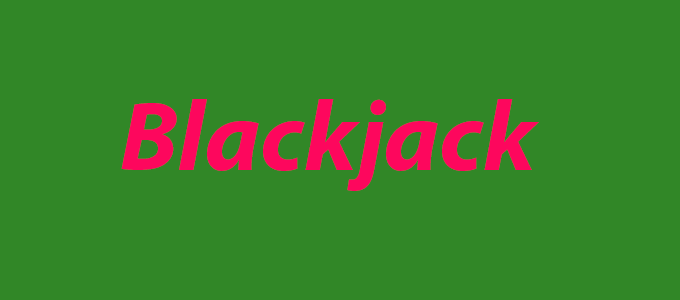
<style>
.page{position:relative;width:680px;height:300px;background:#318727}
.page>*{position:absolute;margin:0}
.t1{font:100px "MyriadPro-BoldIt";color:#fd075d}
</style>
<div class="page">
<p class="t1" style="left:121px;top:99px;width:418px;height:92px">Blackjack</p>
</div>
